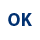
<style>
.page{position:relative;width:40px;height:40px;background:#ffffff}
.page>*{position:absolute;margin:0}
.t1{font:18px "MyriadPro-Bold";color:#013171}
</style>
<div class="page">
<p class="t1" style="left:8px;top:13px;width:24px;height:13px">OK</p>
</div>
